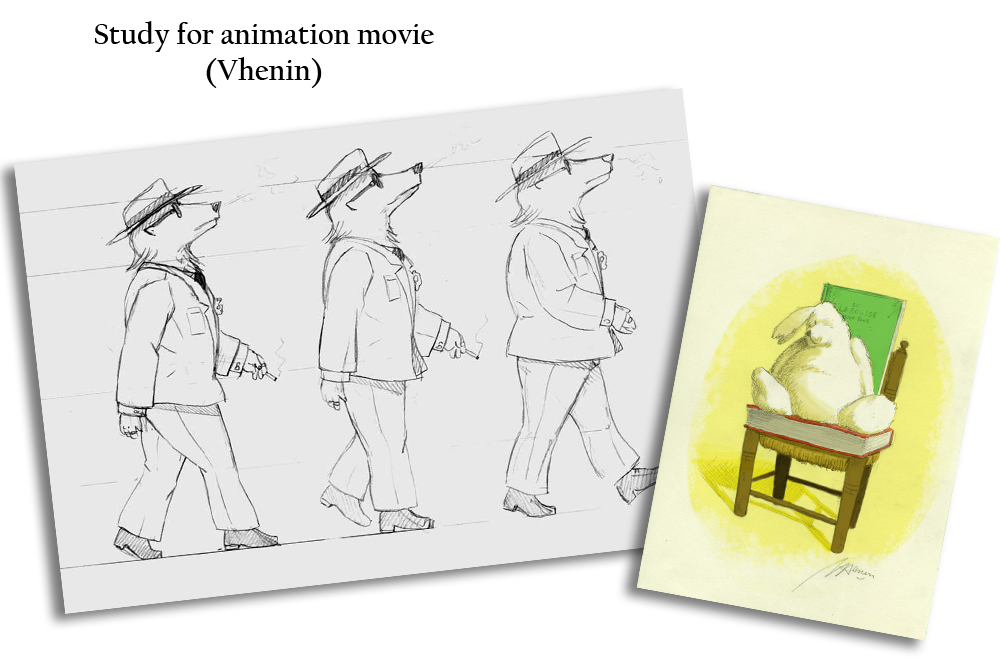
<style>
.page{position:relative;width:1000px;height:671px;background:#ffffff}
.page>*{position:absolute;margin:0}
.t1{font:30px/36px "CalifornianFB-Bold";color:#000000}
</style>
<div class="page">
<p class="t1" style="left:95px;top:21px;width:339px;height:67px;text-align:center">Study for animation movie<br>(Vhenin)</p>
</div>
